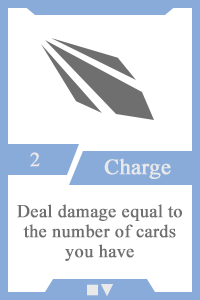
<style>
.page{position:relative;width:200px;height:300px;background:#ffffff}
.page>*{position:absolute;margin:0}
.t1{font:20px "TimesNewRomanPSMT";color:#e9e9e9;font-weight:bold}
.t2{font:22px "TimesNewRomanPSMT";color:#e9e9e9;font-weight:bold}
.t3{font:18px/20px "TimesNewRomanPSMT";color:#6f6f6f;font-weight:bold}
.t4{font:14px "AdobeHeitiStd-Regular";color:#e9e9e9;font-weight:bold}
</style>
<div class="page">
<p class="t1" style="left:30px;top:152px;width:10px;height:15px">2</p>
<p class="t2" style="left:104px;top:158px;width:67px;height:21px">Charge</p>
<p class="t3" style="left:17px;top:204px;width:165px;height:57px;text-align:center">Deal damage equal to the number of cards you have</p>
<p class="t4" style="left:87px;top:284px;width:26px;height:12px">■▼</p>
</div>
